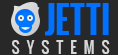
<style>
.page{position:relative;width:118px;height:55px;background:#282828}
.page>*{position:absolute;margin:0}
.t1{font:34.5px "Oswald-Bold";letter-spacing:-0.05em;color:#0071ff;scale:0.96 1}
.t2{font:34.5px "Oswald-Bold";letter-spacing:0.03em;color:#0071ff;scale:0.96 1}
.t3{font:34.5px "Oswald-Bold";letter-spacing:-0.01em;color:#0071ff;scale:0.96 1}
.t4{font:34.5px "Oswald-Bold";letter-spacing:0.11em;color:#0071ff;scale:0.96 1}
.t5{font:14.5px "Oswald-Regular";letter-spacing:0.5em;color:#d8d8d8}
</style>
<div class="page">
<p class="t1" style="left:45px;top:3px;width:10px;height:33px">J</p>
<p class="t1" style="left:56px;top:3px;width:13px;height:32px">E</p>
<p class="t2" style="left:70px;top:3px;width:15px;height:32px">T</p>
<p class="t3" style="left:86px;top:3px;width:15px;height:32px">T</p>
<p class="t4" style="left:102px;top:3px;width:7px;height:32px">I</p>
<p class="t5" style="left:12px;top:40px;width:98px;height:14px">SYSTEMS</p>
</div>
